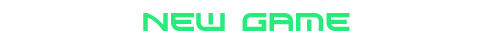
<style>
.page{position:relative;width:500px;height:43px;background:#ffffff}
.page>*{position:absolute;margin:0}
.t1{font:24px "Xirod";color:#27eb7a}
</style>
<div class="page">
<p class="t1" style="left:143px;top:13px;width:207px;height:18px">New game</p>
</div>
